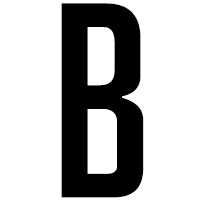
<style>
.page{position:relative;width:200px;height:200px;background:#ffffff}
.page>*{position:absolute;margin:0}
.t1{font:270px "BigNoodleTitling";color:#000000}
</style>
<div class="page">
<p class="t1" style="left:61px;top:3px;width:83px;height:195px">B</p>
</div>
